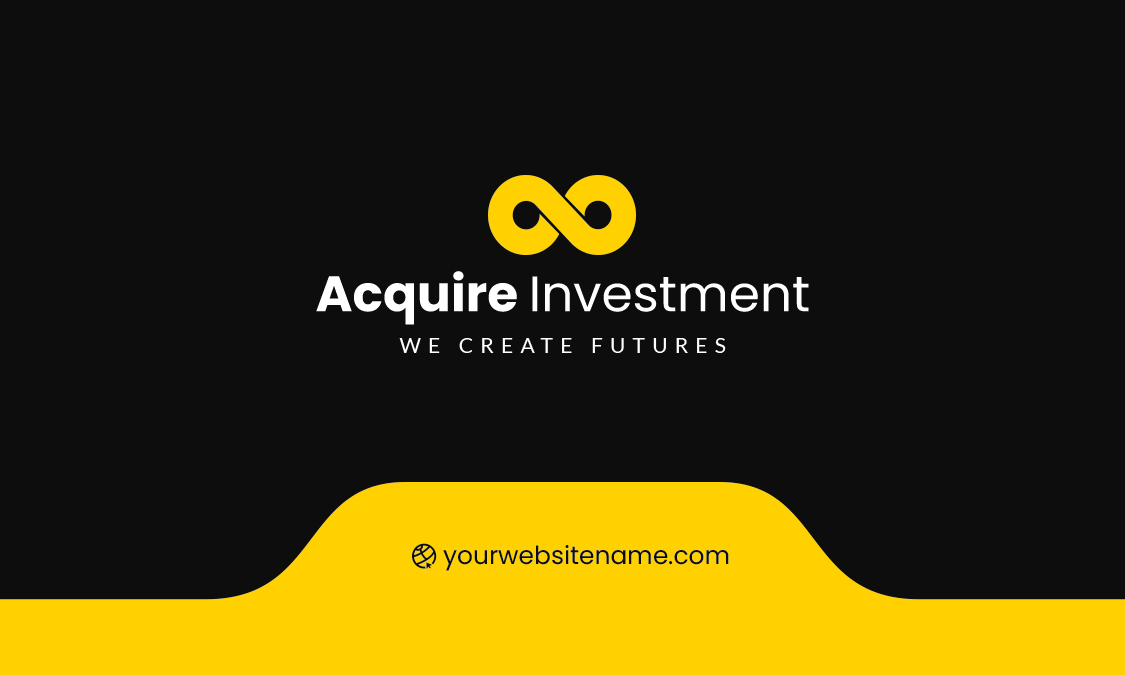
<style>
.page{position:relative;width:1125px;height:675px;background:#0d0d0d}
.page>*{position:absolute;margin:0}
.t1{font:50px "Poppins-Regular";color:#ffffff}
.t2{font:50px "Poppins-Bold";color:#ffffff}
.t3{font:20.8px "Lato-Regular";letter-spacing:0.36em;color:#ffffff}
.t4{font:25px "Poppins-Regular";color:#0d0d0d}
</style>
<div class="page">
<p class="t1" style="left:316px;top:271px;width:493px;height:54px"><span class="t2">Acquire </span>Investment</p>
<p class="t3" style="left:399px;top:338px;width:327px;height:15px">WE CREATE FUTURES</p>
<p class="t4" style="left:443px;top:545px;width:286px;height:26px">yourwebsitename.com</p>
</div>
